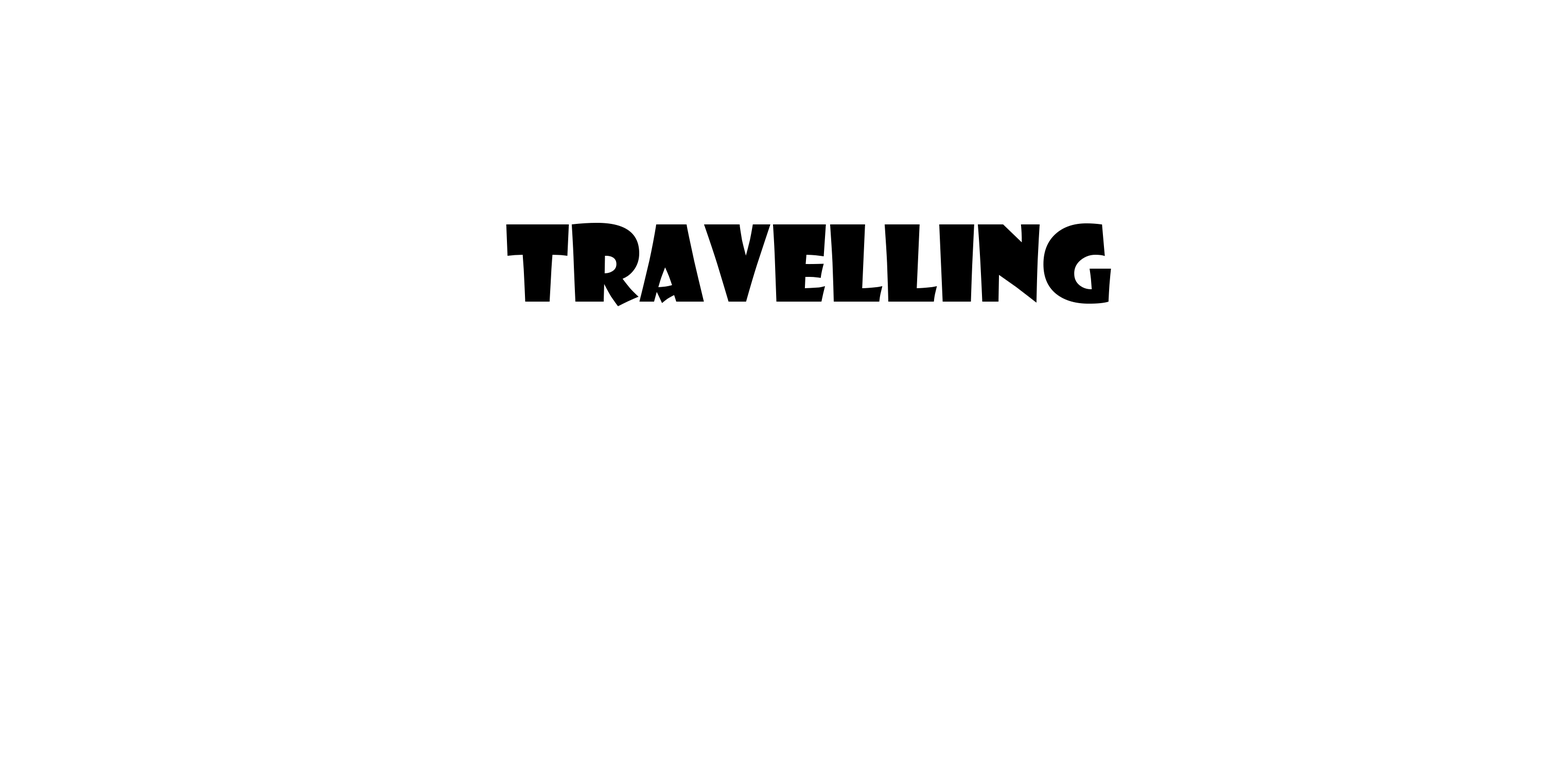
<style>
.page{position:relative;width:1544px;height:772px;background:#ffffff}
.page>*{position:absolute;margin:0}
.t1{font:103px "ShowcardGothic-Reg";color:#000000}
</style>
<div class="page">
<p class="t1" style="left:506px;top:223px;width:605px;height:83px">TRAVELLING</p>
</div>
